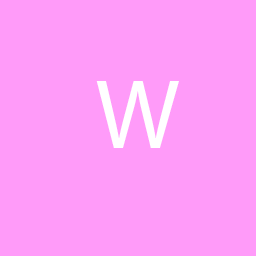
<style>
.page{position:relative;width:256px;height:256px;background:#ff9bf9}
.page>*{position:absolute;margin:0}
.t1{font:100px "MyriadPro-Regular";color:#ffffff}
</style>
<div class="page">
<p class="t1" style="left:96px;top:81px;width:83px;height:67px">W</p>
</div>
